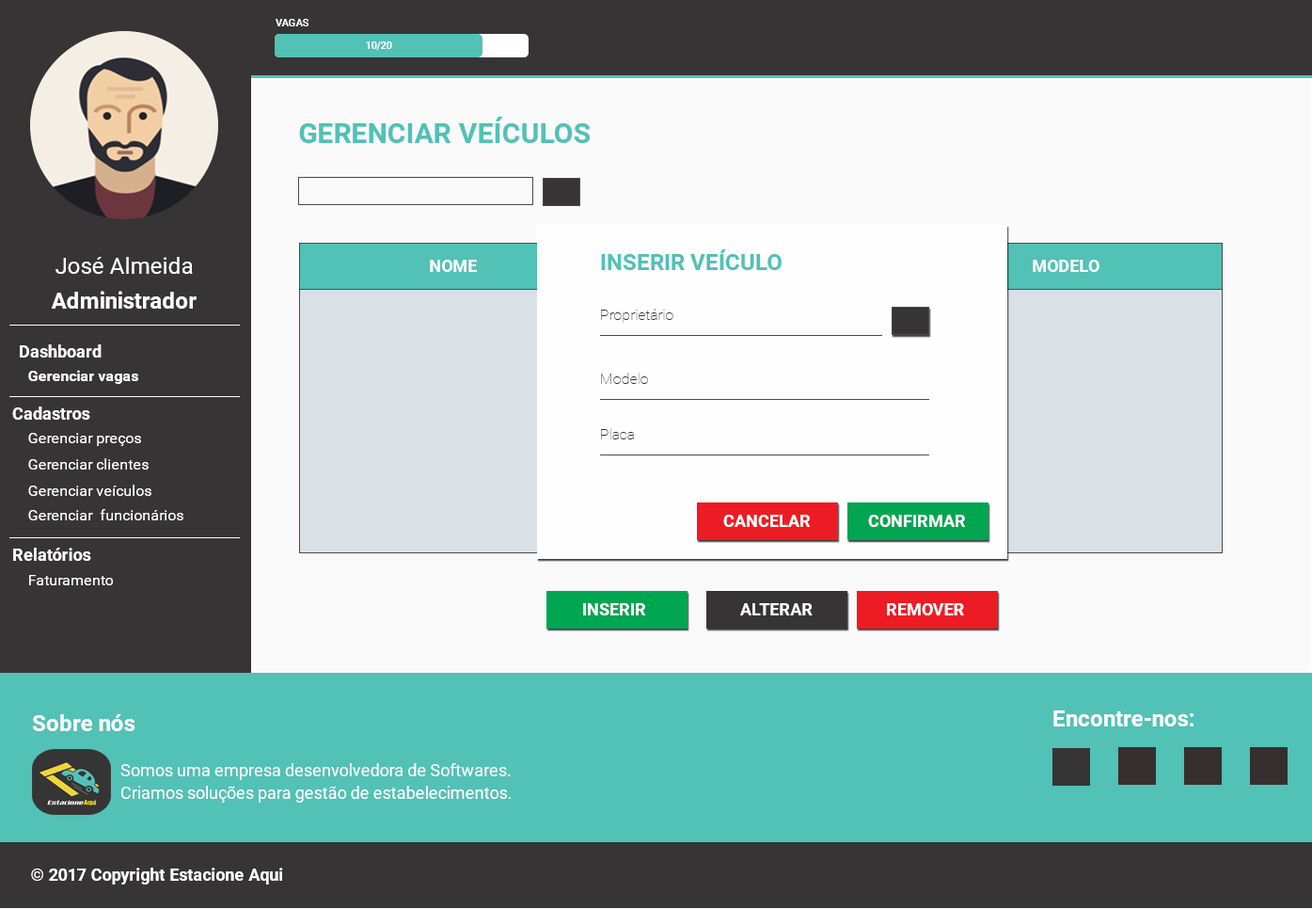
<style>
.page{position:relative;width:1312px;height:909px;background:#373435}
.page>*{position:absolute;margin:0}
.t1{font:10.3px "Roboto-Bold";color:#fefefe;text-transform:uppercase}
.t2{font:10.3px "Roboto-Bold";color:#fefefe}
.t3{font:28.2px "Roboto-Bold";color:#52c1b6;text-transform:uppercase}
.t4{font:22.6px "Roboto-Regular";color:#fefefe}
.t5{font:22.6px "Roboto-Bold";color:#52c1b6;text-transform:uppercase}
.t6{font:16.9px "Roboto-Bold";color:#fefefe;text-transform:uppercase}
.t7{font:22.6px "Roboto-Bold";color:#fefefe}
.t8{font:15.1px "Roboto-Thin";color:#373435}
.t9{font:16.9px "Roboto-Bold";color:#fefefe}
.t10{font:15.1px "Roboto-Bold";color:#fefefe}
.t11{font:15.1px "Roboto-Regular";color:#fefefe}
.t12{font:16.9px/22.6px "Roboto-Regular";color:#fefefe}
</style>
<div class="page">
<p class="t1" style="left:276px;top:19px;width:33px;height:7px">Vagas</p>
<p class="t2" style="left:366px;top:41px;width:26px;height:9px">10/20</p>
<p class="t3" style="left:299px;top:117px;width:291px;height:26px">gerenciar veículos</p>
<p class="t4" style="left:56px;top:257px;width:137px;height:17px">José Almeida</p>
<p class="t5" style="left:601px;top:249px;width:181px;height:21px">inserir veículo</p>
<p class="t6" style="left:430px;top:260px;width:47px;height:12px">nOME</p>
<p class="t6" style="left:1033px;top:260px;width:67px;height:12px">modelo</p>
<p class="t7" style="left:51px;top:291px;width:146px;height:18px">Administrador</p>
<p class="t8" style="left:601px;top:309px;width:73px;height:14px">Proprietário</p>
<p class="t9" style="left:20px;top:344px;width:82px;height:13px">Dashboard</p>
<p class="t10" style="left:28px;top:370px;width:110px;height:14px">Gerenciar vagas</p>
<p class="t8" style="left:601px;top:373px;width:47px;height:11px">Modelo</p>
<p class="t9" style="left:12px;top:406px;width:78px;height:14px">Cadastros</p>
<p class="t11" style="left:28px;top:433px;width:113px;height:13px">Gerenciar preços</p>
<p class="t8" style="left:601px;top:428px;width:33px;height:11px">Placa</p>
<p class="t11" style="left:28px;top:458px;width:121px;height:11px">Gerenciar clientes</p>
<p class="t11" style="left:28px;top:484px;width:123px;height:12px">Gerenciar veículos</p>
<p class="t11" style="left:28px;top:509px;width:155px;height:11px">Gerenciar  funcionários</p>
<p class="t6" style="left:723px;top:515px;width:87px;height:12px">CancelaR</p>
<p class="t6" style="left:868px;top:515px;width:97px;height:12px">Confirmar</p>
<p class="t9" style="left:13px;top:547px;width:78px;height:14px">Relatórios</p>
<p class="t11" style="left:29px;top:575px;width:84px;height:10px">Faturamento</p>
<p class="t6" style="left:583px;top:603px;width:62px;height:12px">INSERIR</p>
<p class="t6" style="left:740px;top:603px;width:73px;height:12px">ALTERAR</p>
<p class="t6" style="left:887px;top:603px;width:77px;height:12px">REMOVER</p>
<p class="t7" style="left:32px;top:714px;width:103px;height:17px">Sobre nós</p>
<p class="t7" style="left:1054px;top:710px;width:140px;height:16px">Encontre-nos:</p>
<p class="t12" style="left:120px;top:763px;width:391px;height:39px">Somos uma empresa desenvolvedora de Softwares. Criamos soluções para gestão de estabelecimentos.</p>
<p class="t9" style="left:31px;top:867px;width:252px;height:17px">© 2017 Copyright Estacione Aqui</p>
</div>
